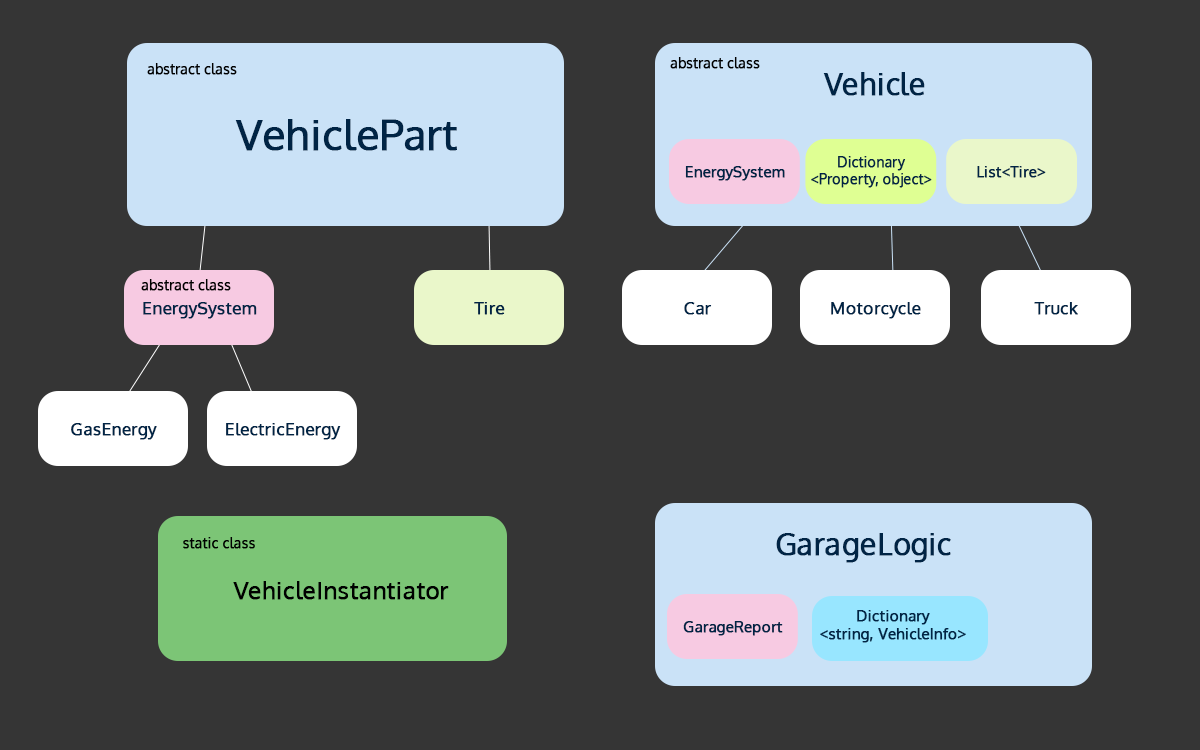
<style>
.page{position:relative;width:1200px;height:750px;background:#353535}
.page>*{position:absolute;margin:0}
.t1{font:13.6px "Oxygen-Regular";color:#000000;font-weight:bold}
.t2{font:30px "Oxygen-Regular";color:#002445;font-weight:bold}
.t3{font:42.2px "Oxygen-Regular";color:#002445;font-weight:bold}
.t4{font:14px "Oxygen-Regular";color:#002445;font-weight:bold}
.t5{font:15px "Oxygen-Regular";color:#002445;font-weight:bold}
.t6{font:17.3px "Oxygen-Regular";color:#002445;font-weight:bold}
.t7{font:24px "Oxygen-Regular";color:#000000;font-weight:bold}
</style>
<div class="page">
<p class="t1" style="left:147px;top:63px;width:90px;height:12px">abstract class</p>
<p class="t1" style="left:670px;top:57px;width:90px;height:12px">abstract class</p>
<p class="t2" style="left:823px;top:72px;width:102px;height:24px">Vehicle</p>
<p class="t3" style="left:235px;top:119px;width:222px;height:32px">VehiclePart</p>
<p class="t4" style="left:811px;top:156px;width:121px;height:32px;text-align:center">Dictionary<br>&lt;Property, object&gt;</p>
<p class="t5" style="left:685px;top:166px;width:100px;height:15px">EnergySystem</p>
<p class="t5" style="left:977px;top:166px;width:69px;height:12px">List&lt;Tire&gt;</p>
<p class="t1" style="left:141px;top:279px;width:90px;height:12px">abstract class</p>
<p class="t6" style="left:143px;top:302px;width:114px;height:17px">EnergySystem</p>
<p class="t6" style="left:474px;top:302px;width:31px;height:13px">Tire</p>
<p class="t6" style="left:684px;top:302px;width:28px;height:13px">Car</p>
<p class="t6" style="left:831px;top:302px;width:90px;height:17px">Motorcycle</p>
<p class="t6" style="left:1034px;top:302px;width:44px;height:13px">Truck</p>
<p class="t6" style="left:71px;top:423px;width:86px;height:17px">GasEnergy</p>
<p class="t6" style="left:226px;top:423px;width:115px;height:17px">ElectricEnergy</p>
<p class="t2" style="left:776px;top:533px;width:175px;height:30px">GarageLogic</p>
<p class="t1" style="left:183px;top:537px;width:72px;height:12px">static class</p>
<p class="t7" style="left:233px;top:581px;width:216px;height:19px">VehicleInstantiator</p>
<p class="t5" style="left:820px;top:610px;width:146px;height:33px;text-align:center">Dictionary<br>&lt;string, VehicleInfo&gt;</p>
<p class="t5" style="left:683px;top:621px;width:100px;height:15px">GarageReport</p>
</div>
